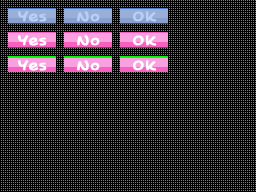
<style>
.page{position:relative;width:256px;height:192px;background:#000000}
.page>*{position:absolute;margin:0}
.t1{font:14px/24px "PopJoyStd-B";letter-spacing:0.05em;color:#ffffff;font-weight:bold}
.t2{font:14px/24px "PopJoyStd-B";letter-spacing:0.05em;color:#b8d0f8;font-weight:bold}
</style>
<div class="page">
<p class="t1" style="left:18px;top:11px;width:29px;height:60px;text-align:center"><span class="t2">Yes<br></span>Yes<br>Yes</p>
<p class="t1" style="left:77px;top:11px;width:23px;height:60px;text-align:center"><span class="t2">No<br></span>No<br>No</p>
<p class="t1" style="left:133px;top:11px;width:24px;height:60px;text-align:center"><span class="t2">OK<br></span>OK<br>OK</p>
</div>
